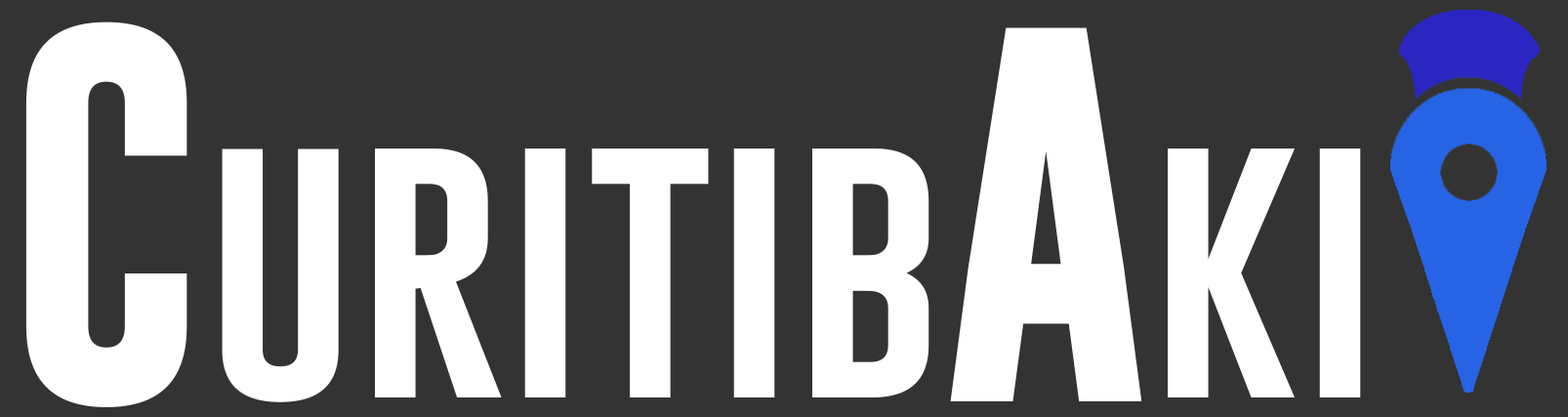
<style>
.page{position:relative;width:1568px;height:417px;background:#333333}
.page>*{position:absolute;margin:0}
.t1{font:293.5px "Gobold";color:#ffffff}
.t2{font:381.5px "GoboldBold";color:#ffffff}
</style>
<div class="page">
<p class="t1" style="left:25px;top:21px;width:1336px;height:386px"><span class="t2">C</span>uritib<span class="t2">A</span>ki</p>
</div>
